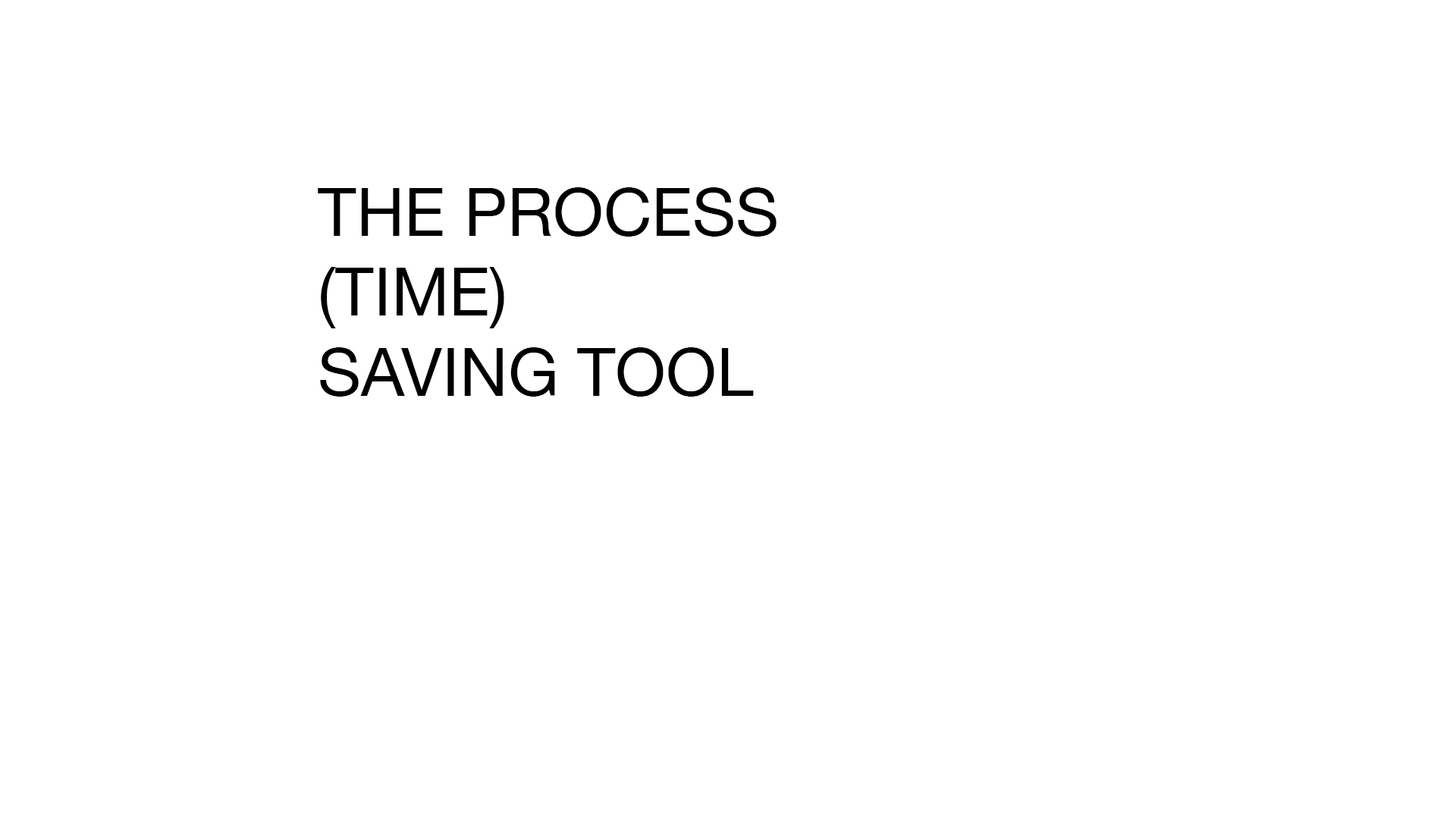
<style>
.page{position:relative;width:1456px;height:819px;background:#ffffff}
.page>*{position:absolute;margin:0}
.t1{font:66.7px "HelveticaNeue";color:#000000;text-transform:uppercase}
</style>
<div class="page">
<p class="t1" style="left:318px;top:187px;width:459px;height:210px">The process <br>(time) <br>saving tool</p>
</div>
